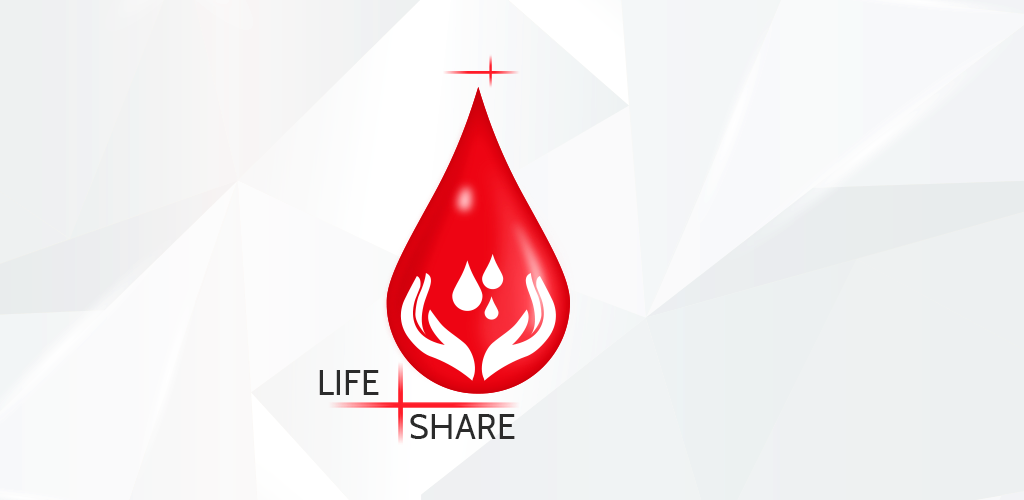
<style>
.page{position:relative;width:1024px;height:500px}
.page>*{position:absolute;margin:0}
.t1{font:34.5px "Cabin-Regular";color:#2b2b2b}
</style>
<div class="page">
<p class="t1" style="left:319px;top:370px;width:60px;height:25px">LIFE</p>
<p class="t1" style="left:410px;top:414px;width:105px;height:25px">SHARE</p>
</div>
